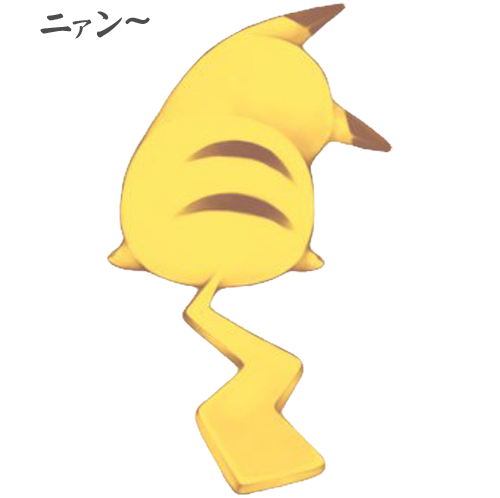
<style>
.page{position:relative;width:500px;height:498px;background:#ffffff}
.page>*{position:absolute;margin:0}
.t1{font:40px "I.Ngaan";letter-spacing:-0.24em;color:#4c4c4c}
.t2{font:32px "I.Ngaan";letter-spacing:-0.32em;color:#4c4c4c}
.t3{font:40px "I.Ngaan";letter-spacing:-0.32em;color:#4c4c4c}
.t4{font:49px "I.Ngaan";letter-spacing:0.02em;color:#4c4c4c;scale:1.29 1}
</style>
<div class="page">
<p class="t1" style="left:40px;top:11px;width:110px;height:28px">ニ<span class="t2">ァ</span><span class="t3">ン </span><span class="t4">~</span></p>
</div>
